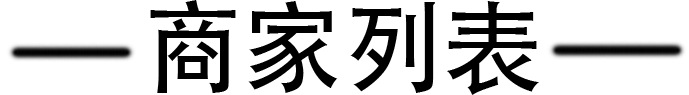
<style>
.page{position:relative;width:689px;height:95px;background:#ffffff}
.page>*{position:absolute;margin:0}
.t1{font:100px "STHeitiSC-Medium";color:#000000}
</style>
<div class="page">
<p class="t1" style="left:150px;top:0px;width:389px;height:95px">商家列表</p>
</div>
